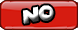
<style>
.page{position:relative;width:78px;height:30px;background:#d61c11}
.page>*{position:absolute;margin:0}
.t1{font:20.9px "TikiTropic"}
</style>
<div class="page">
<p class="t1" style="left:23px;top:5px;width:31px;height:19px">NO</p>
</div>
